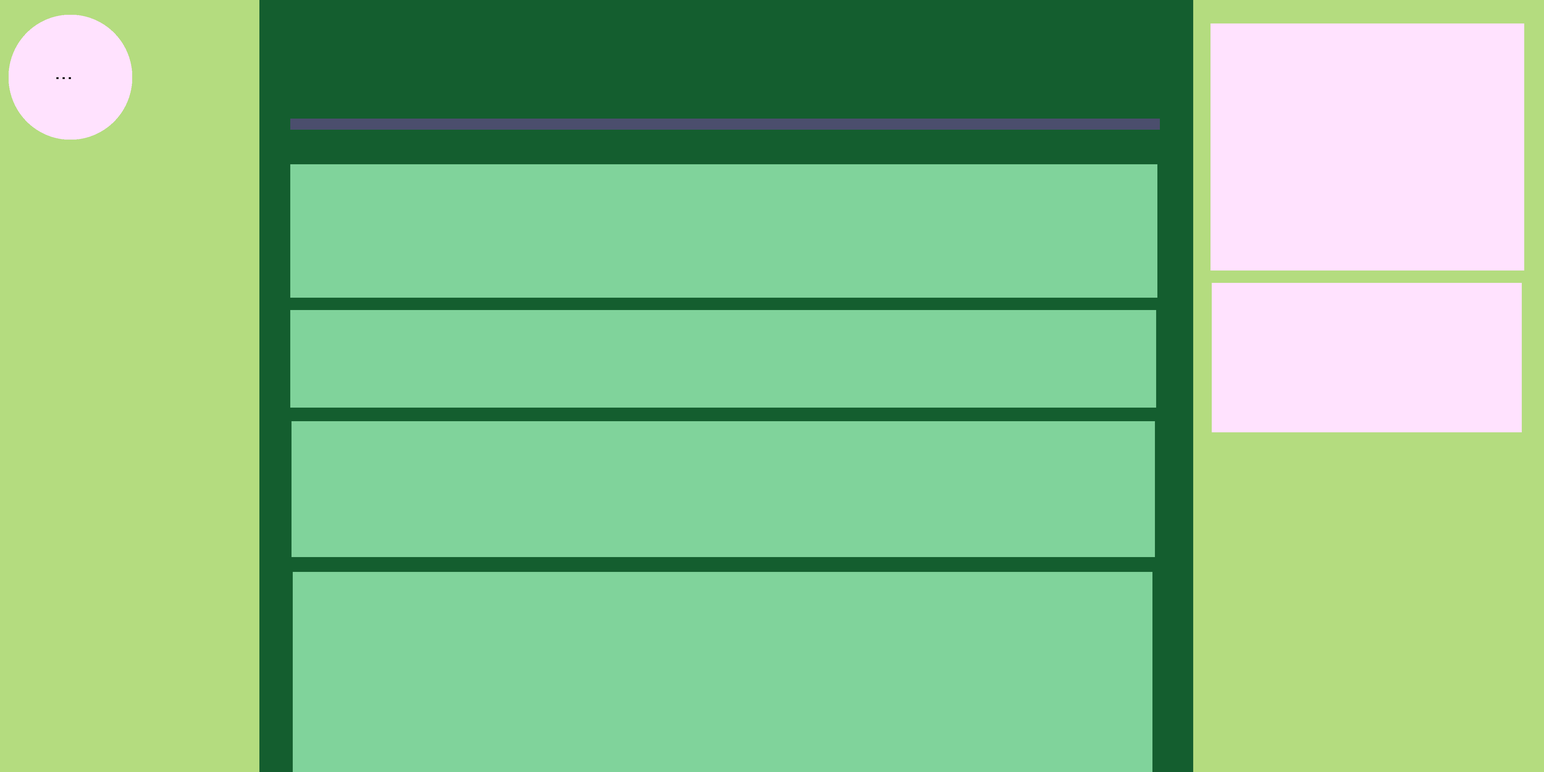
<style>
.page{position:relative;width:1544px;height:772px;background:#80d39b}
.page>*{position:absolute;margin:0}
.t1{font:22.2px "ArialMT";color:#000000}
</style>
<div class="page">
<p class="t1" style="left:56px;top:77px;width:15px;height:2px">...</p>
</div>
